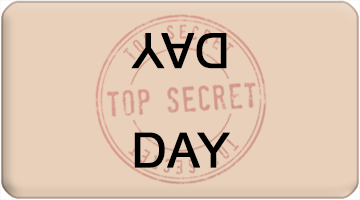
<style>
.page{position:relative;width:360px;height:200px;background:#e8d0bb}
.page>*{position:absolute;margin:0}
.t1{font:48px "ArialMT";color:#000000;font-weight:bold}
</style>
<div class="page">
<p class="t1" style="left:131px;top:33px;width:96px;height:36px;rotate:180deg">DAY</p>
<p class="t1" style="left:134px;top:132px;width:96px;height:36px">DAY</p>
</div>
